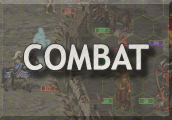
<style>
.page{position:relative;width:172px;height:120px}
.page>*{position:absolute;margin:0}
.t1{font:33.3px "TrebuchetMS";color:#e0ded7;font-weight:bold}
</style>
<div class="page">
<p class="t1" style="left:24px;top:44px;width:125px;height:26px">COMBAT</p>
</div>
